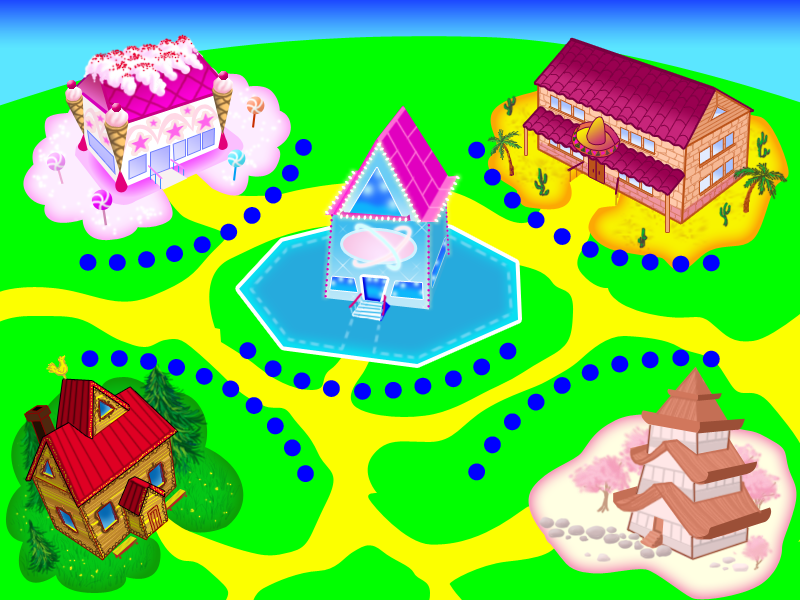
<style>
.page{position:relative;width:800px;height:600px;background:#00ff00}
.page>*{position:absolute;margin:0}
.t1{font:79.4px "Bigshot";letter-spacing:0.12em;color:#0000ff}
.t2{font:18.1px "TimesNewRomanPSMT";color:#e100bf}
.t3{font:21.6px "TimesNewRomanPSMT";color:#e100bf}
.t4{font:38.3px "TimesNewRomanPSMT";color:#ffffff;scale:0.61 1}
</style>
<div class="page">
<p class="t1" style="left:79px;top:139px;width:233px;height:132px">..........</p>
<p class="t1" style="left:468px;top:141px;width:252px;height:132px;rotate:-3deg">..........</p>
<p class="t2" style="left:444px;top:183px;width:6px;height:72px;rotate:-93deg">................</p>
<p class="t3" style="left:324px;top:214px;width:10px;height:84px;rotate:-85deg">................</p>
<p class="t4" style="left:340px;top:214px;width:68px;height:8px;rotate:3deg">............</p>
<p class="t3" style="left:427px;top:224px;width:4px;height:84px;rotate:-90deg">................</p>
<p class="t1" style="left:239px;top:342px;width:278px;height:58px">..........</p>
<p class="t1" style="left:81px;top:350px;width:233px;height:132px">..........</p>
<p class="t1" style="left:468px;top:349px;width:252px;height:132px;rotate:3deg">..........</p>
</div>
